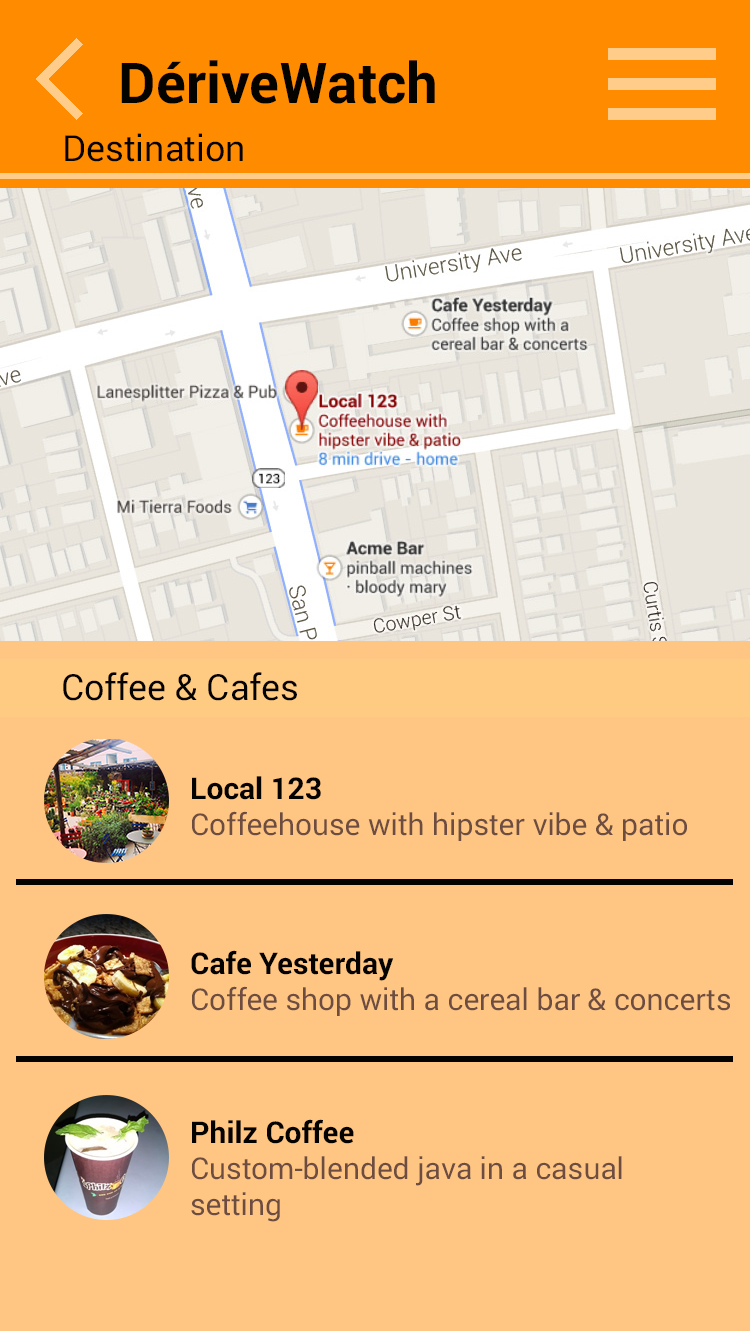
<style>
.page{position:relative;width:750px;height:1331px;background:#ffc683}
.page>*{position:absolute;margin:0}
.t1{font:56.2px "Roboto-Bold";color:#050300}
.t2{font:36px "Roboto-Black";color:#050300}
.t3{font:30px "Roboto-Black";color:#6d4c41}
.t4{font:30px "Roboto-Bold";color:#050300}
</style>
<div class="page">
<p class="t1" style="left:121px;top:60px;width:314px;height:44px">DériveWatch</p>
<p class="t2" style="left:65px;top:133px;width:178px;height:29px">Destination</p>
<p class="t2" style="left:63px;top:672px;width:234px;height:29px">Coffee &amp; Cafes</p>
<p class="t3" style="left:192px;top:776px;width:495px;height:65px"><span class="t4">Local 123<br></span>Coffeehouse with hipster vibe &amp; patio</p>
<p class="t3" style="left:191px;top:950px;width:539px;height:66px"><span class="t4">Cafe Yesterday<br></span>Coffee shop with a cereal bar &amp; concerts</p>
<p class="t3" style="left:191px;top:1119px;width:431px;height:103px"><span class="t4">Philz Coffee<br></span>Custom-blended java in a casual<br>setting</p>
</div>
